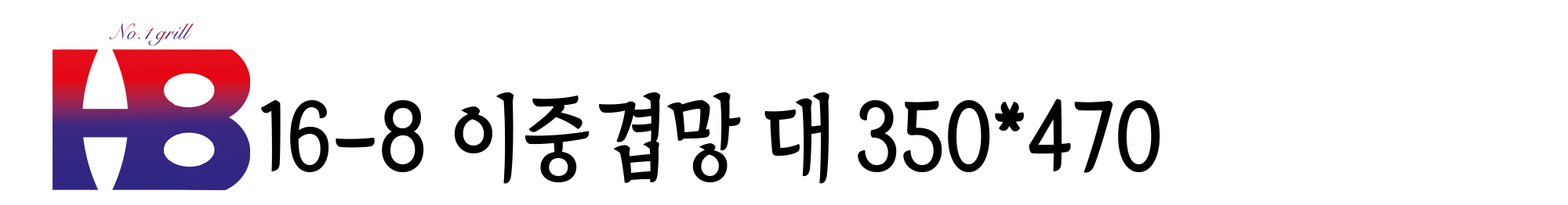
<style>
.page{position:relative;width:1568px;height:205px;background:#ffffff}
.page>*{position:absolute;margin:0}
.t1{font:93.7px "TheIndependenceHallofKorea-Regular";color:#000000;scale:0.89 1}
</style>
<div class="page">
<p class="t1" style="left:261px;top:93px;width:899px;height:91px">16-8 이중겹망 대 350*470</p>
</div>
